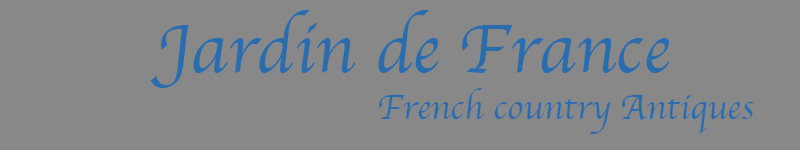
<style>
.page{position:relative;width:800px;height:150px;background:#888888}
.page>*{position:absolute;margin:0}
.t1{font:72px "Apple-Chancery";color:#2a6daf}
.t2{font:36px "Apple-Chancery";color:#2a6daf}
</style>
<div class="page">
<p class="t1" style="left:150px;top:10px;width:519px;height:78px">Jardin de France</p>
<p class="t2" style="left:379px;top:88px;width:375px;height:46px">French country Antiques</p>
</div>
